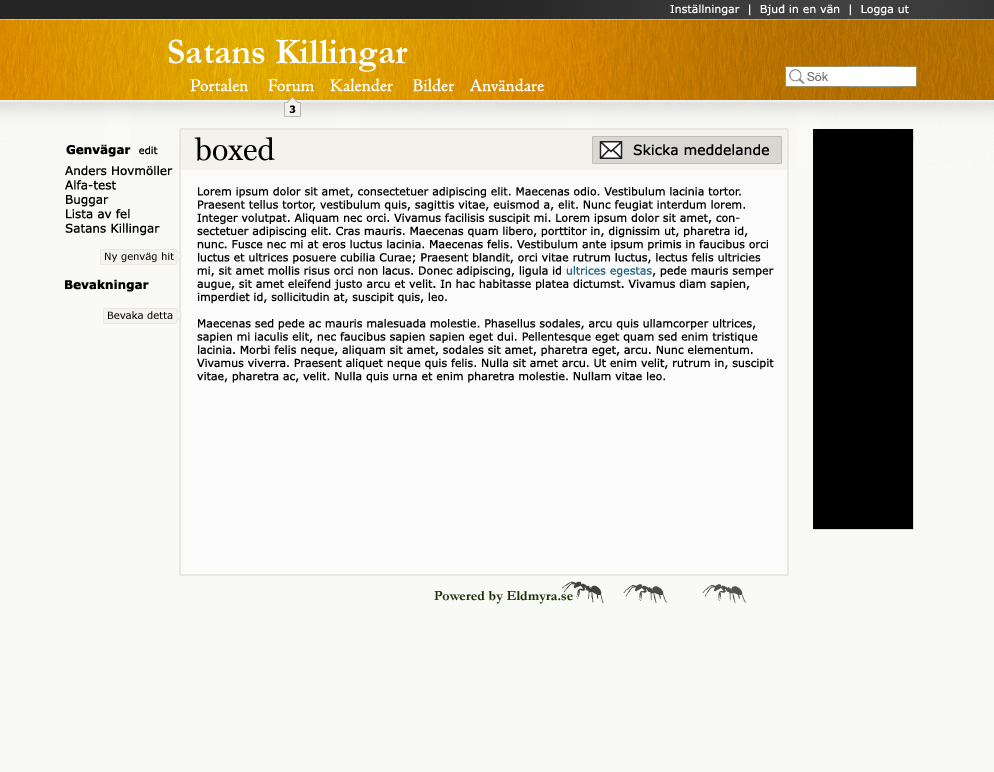
<style>
.page{position:relative;width:994px;height:772px;background:#f9f9f5}
.page>*{position:absolute;margin:0}
.t1{font:11px "Verdana";color:#fefefe}
.t2{font:36px "Garamond-Bold";color:#ffffff}
.t3{font:18px "AJensonPro-Regular";color:#fefefe}
.t4{font:12px "HelveticaNeue";color:#757575}
.t5{font:10px "Verdana-Bold";color:#000000}
.t6{font:30px "Georgia";color:#000000}
.t7{font:12px "Verdana-Bold";color:#000000}
.t8{font:10px "Verdana";color:#000000}
.t9{font:14px "Verdana";color:#000000}
.t10{font:12px "Verdana";color:#000000}
.t11{font:11px "Verdana";color:#000000}
.t12{font:11px "Verdana";color:#156587}
.t13{font:14px "Garamond-Bold";color:#1d2e08}
</style>
<div class="page">
<p class="t1" style="left:670px;top:4px;width:239px;height:12px">Inställningar  |  Bjud in en vän  |  Logga ut</p>
<p class="t2" style="left:168px;top:39px;width:240px;height:33px">Satans Killingar</p>
<p class="t3" style="left:190px;top:78px;width:355px;height:14px">Portalen     Forum    Kalender     Bilder    Användare</p>
<p class="t4" style="left:807px;top:72px;width:22px;height:9px">Sök</p>
<p class="t5" style="left:289px;top:105px;width:7px;height:8px">3</p>
<p class="t6" style="left:194px;top:137px;width:81px;height:24px">boxed</p>
<p class="t7" style="left:66px;top:144px;width:92px;height:13px">Genvägar  <span class="t8">edit</span></p>
<p class="t9" style="left:633px;top:144px;width:136px;height:12px">Skicka meddelande</p>
<p class="t10" style="left:65px;top:165px;width:108px;height:71px">Anders Hovmöller<br>Alfa-test<br>Buggar<br>Lista av fel<br>Satans Killingar</p>
<p class="t11" style="left:197px;top:187px;width:577px;height:196px">Lorem ipsum dolor sit amet, consectetuer adipiscing elit. Maecenas odio. Vestibulum lacinia tortor. Praesent tellus tortor, vestibulum quis, sagittis vitae, euismod a, elit. Nunc feugiat interdum lorem. Integer volutpat. Aliquam nec orci. Vivamus facilisis suscipit mi. Lorem ipsum dolor sit amet, consectetuer adipiscing elit. Cras mauris. Maecenas quam libero, porttitor in, dignissim ut, pharetra id, nunc. Fusce nec mi at eros luctus lacinia. Maecenas felis. Vestibulum ante ipsum primis in faucibus orci luctus et ultrices posuere cubilia Curae; Praesent blandit, orci vitae rutrum luctus, lectus felis ultricies mi, sit amet mollis risus orci non lacus. Donec adipiscing, ligula id <span class="t12">ultrices egestas</span>, pede mauris semper augue, sit amet eleifend justo arcu et velit. In hac habitasse platea dictumst. Vivamus diam sapien, imperdiet id, sollicitudin at, suscipit quis, leo.<br><br>Maecenas sed pede ac mauris malesuada molestie. Phasellus sodales, arcu quis ullamcorper ultrices, sapien mi iaculis elit, nec faucibus sapien sapien eget dui. Pellentesque eget quam sed enim tristique lacinia. Morbi felis neque, aliquam sit amet, sodales sit amet, pharetra eget, arcu. Nunc elementum. Vivamus viverra. Praesent aliquet neque quis felis. Nulla sit amet arcu. Ut enim velit, rutrum in, suscipit vitae, pharetra ac, velit. Nulla quis urna et enim pharetra molestie. Nullam vitae leo.</p>
<p class="t8" style="left:105px;top:252px;width:69px;height:10px">Ny genväg hit</p>
<p class="t7" style="left:65px;top:279px;width:84px;height:13px">Bevakningar</p>
<p class="t8" style="left:108px;top:311px;width:65px;height:8px">Bevaka detta</p>
<p class="t13" style="left:434px;top:591px;width:139px;height:13px">Powered by Eldmyra.se</p>
</div>
